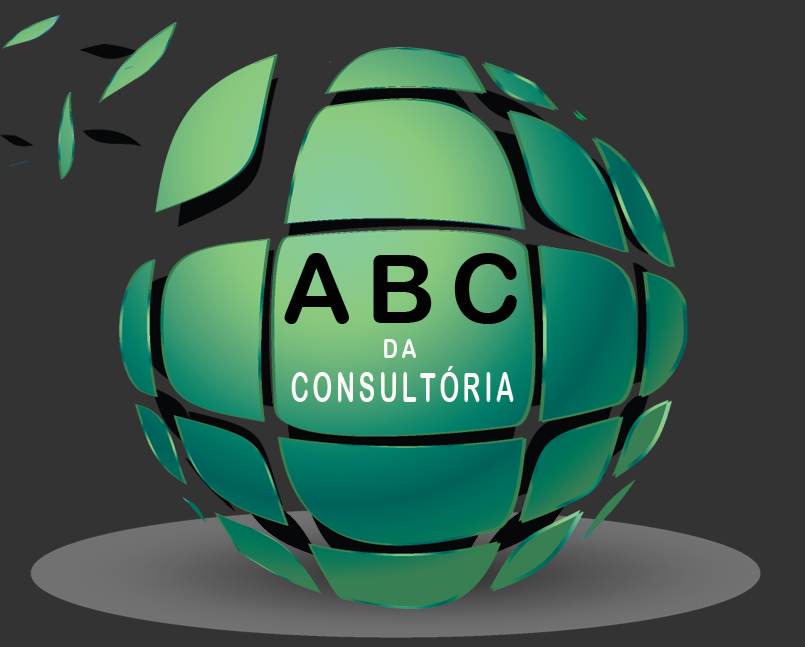
<style>
.page{position:relative;width:805px;height:647px;background:#333333}
.page>*{position:absolute;margin:0}
.t1{font:96.5px "ArialRoundedMTBold";letter-spacing:0.15em;color:#020202;text-transform:uppercase}
.t2{font:25.5px "ArialRoundedMTBold";letter-spacing:0.15em;color:#fbfcf9;text-transform:uppercase;scale:0.83 1}
.t3{font:40.6px "ArialRoundedMTBold";letter-spacing:0.15em;color:#fbfcf9;text-transform:uppercase;scale:0.61 1}
</style>
<div class="page">
<p class="t1" style="left:284px;top:253px;width:233px;height:71px">ABC</p>
<p class="t2" style="left:384px;top:339px;width:32px;height:19px">da</p>
<p class="t3" style="left:291px;top:366px;width:223px;height:36px">Consultória</p>
</div>
